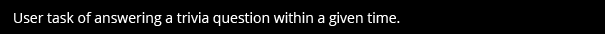
<style>
.page{position:relative;width:605px;height:34px;background:#000000}
.page>*{position:absolute;margin:0}
.t1{font:14px "OpenSans";color:#ffffff}
</style>
<div class="page">
<p class="t1" style="left:14px;top:12px;width:386px;height:14px">User task of answering a trivia question within a given time.</p>
</div>
